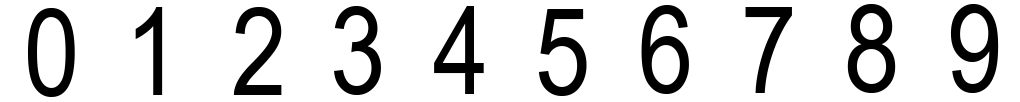
<style>
.page{position:relative;width:1020px;height:102px;background:#ffffff}
.page>*{position:absolute;margin:0}
.t1{font:121.6px "ArialNarrow";letter-spacing:0.1em;color:#000000}
</style>
<div class="page">
<p class="t1" style="left:334px;top:6px;width:47px;height:89px">3</p>
<p class="t1" style="left:434px;top:6px;width:50px;height:88px">4</p>
<p class="t1" style="left:641px;top:5px;width:48px;height:89px">6</p>
<p class="t1" style="left:847px;top:4px;width:49px;height:89px">8</p>
<p class="t1" style="left:950px;top:4px;width:49px;height:89px">9</p>
<p class="t1" style="left:27px;top:8px;width:48px;height:89px">0</p>
<p class="t1" style="left:135px;top:7px;width:28px;height:88px">1</p>
<p class="t1" style="left:233px;top:7px;width:49px;height:88px">2</p>
<p class="t1" style="left:538px;top:9px;width:49px;height:87px">5</p>
<p class="t1" style="left:745px;top:7px;width:47px;height:86px">7</p>
</div>
